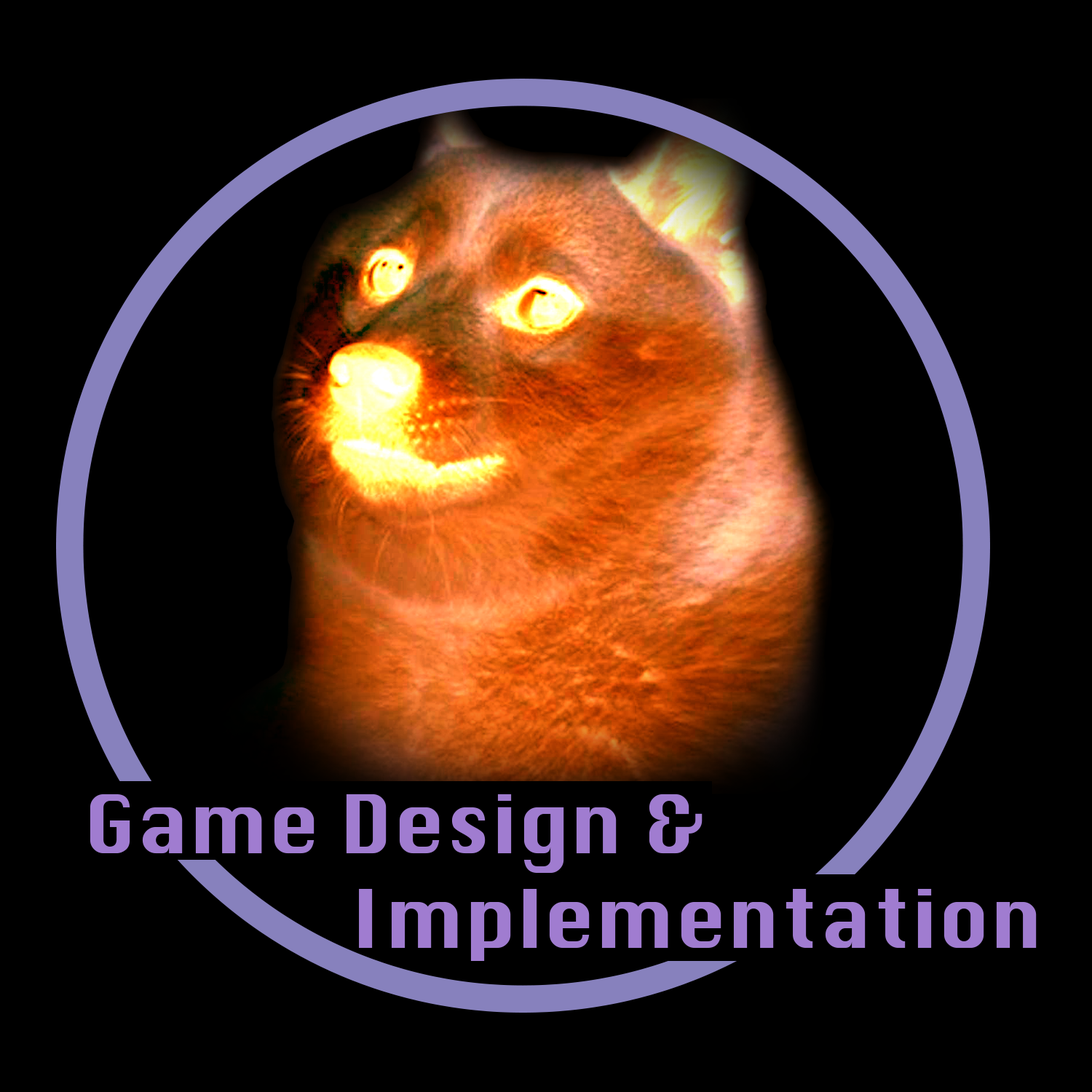
<style>
.page{position:relative;width:1092px;height:1092px;background:#000000}
.page>*{position:absolute;margin:0}
.t1{font:78.9px "Silom";color:#a07cd0}
</style>
<div class="page">
<p class="t1" style="left:90px;top:794px;width:947px;height:167px">Game Design &amp; <br>          Implementation</p>
</div>
